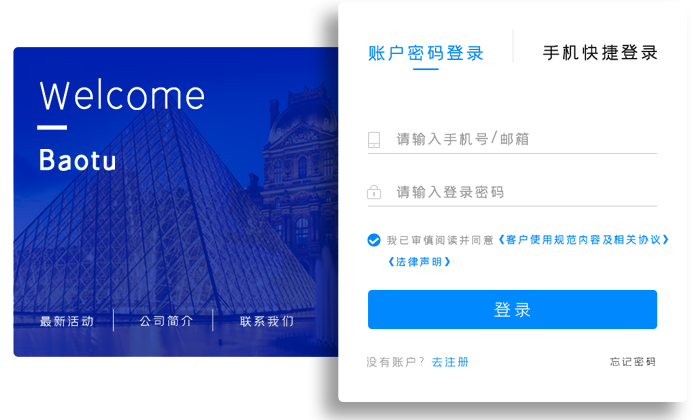
<style>
.page{position:relative;width:700px;height:420px;background:#ffffff}
.page>*{position:absolute;margin:0}
.t1{font:19.6px "58--Regular";color:#0388ff}
.t2{font:19.6px "58--Regular";color:#111111}
.t3{font:43px "58--Regular";letter-spacing:0.02em;color:#ffffff}
.t4{font:15.7px "58--Regular";color:#999999}
.t5{font:30.6px "59--Regular";letter-spacing:0.05em;color:#ffffff;font-weight:bold}
.t6{font:11.8px "58--Regular";letter-spacing:0.02em;color:#999999}
.t7{font:11.8px "58--Regular";letter-spacing:0.02em;color:#0388ff}
.t8{font:19.6px "58--Regular";letter-spacing:0.02em;color:#ffffff}
.t9{font:13.6px "58--Regular";letter-spacing:0.02em;color:#ffffff}
.t10{font:13.6px "58--Regular";letter-spacing:0.02em}
.t11{font:13.6px "58--Regular";letter-spacing:0.02em;color:#f5f6fa}
.t12{font:13.1px "58--Regular";color:#999999}
.t13{font:13.1px "58--Regular";color:#3a88f7}
.t14{font:11.8px "58--Regular";letter-spacing:0.02em}
</style>
<div class="page">
<p class="t1" style="left:368px;top:44px;width:115px;height:17px">账户密码登录</p>
<p class="t2" style="left:543px;top:44px;width:114px;height:17px">手机快捷登录</p>
<p class="t3" style="left:40px;top:78px;width:164px;height:32px">Welcome</p>
<p class="t4" style="left:396px;top:130px;width:133px;height:16px">请输入手机号/邮箱</p>
<p class="t5" style="left:40px;top:149px;width:75px;height:22px">Baotu</p>
<p class="t4" style="left:396px;top:185px;width:108px;height:14px">请输入登录密码</p>
<p class="t6" style="left:387px;top:235px;width:106px;height:10px">我已审慎阅读并同意</p>
<p class="t7" style="left:499px;top:234px;width:170px;height:11px">《客户使用规范内容及相关协议》</p>
<p class="t7" style="left:389px;top:257px;width:61px;height:10px">《法律声明》</p>
<p class="t8" style="left:494px;top:302px;width:36px;height:16px">登录</p>
<p class="t9" style="left:40px;top:315px;width:53px;height:12px">最新活动</p>
<p class="t10" style="left:140px;top:315px;width:53px;height:11px">公司简介</p>
<p class="t11" style="left:240px;top:315px;width:53px;height:12px">联系我们</p>
<p class="t12" style="left:367px;top:357px;width:101px;height:11px">没有账户?  <span class="t13">去注册</span></p>
<p class="t14" style="left:610px;top:357px;width:45px;height:9px">忘记密码</p>
</div>
